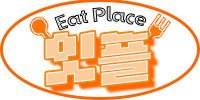
<style>
.page{position:relative;width:200px;height:100px;background:#ffffff}
.page>*{position:absolute;margin:0}
.t1{font:20px "GapyeongWave";letter-spacing:-0.05em}
.t2{font:60px "Cafe24PROUP";letter-spacing:-0.05em;color:#fccb9a}
</style>
<div class="page">
<p class="t1" style="left:54px;top:6px;width:93px;height:25px;rotate:-3deg">Eat Place</p>
<p class="t2" style="left:45px;top:31px;width:106px;height:55px">잇플</p>
</div>
